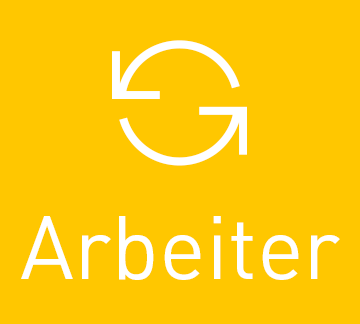
<style>
.page{position:relative;width:360px;height:324px;background:#ffc700}
.page>*{position:absolute;margin:0}
.t1{font:88.4px "DIN-Regular";color:#ffffff}
</style>
<div class="page">
<p class="t1" style="left:21px;top:216px;width:319px;height:64px">Arbeiter</p>
</div>
